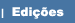
<style>
.page{position:relative;width:75px;height:23px;background:#4775a3}
.page>*{position:absolute;margin:0}
.t1{font:12px "Arial-Black";color:#ffffff}
.t2{font:10px "Arial-Black";color:#ffffff}
</style>
<div class="page">
<p class="t1" style="left:1px;top:7px;width:63px;height:12px"><span class="t2">|</span>  Edições</p>
</div>
